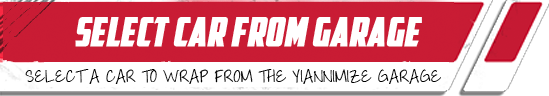
<style>
.page{position:relative;width:549px;height:96px;background:#ffffff}
.page>*{position:absolute;margin:0}
.t1{font:40px "AmericanCaptain";color:#ffffff;text-transform:uppercase;font-weight:bold;font-style:italic}
.t2{font:18px "ThrowMyHandsUpintheAir";letter-spacing:0.025em;color:#000000;text-transform:uppercase}
</style>
<div class="page">
<p class="t1" style="left:75px;top:17px;width:347px;height:30px">select car from garage</p>
<p class="t2" style="left:25px;top:69px;width:416px;height:15px">select a car to wrap from the yiannimize garage</p>
</div>
